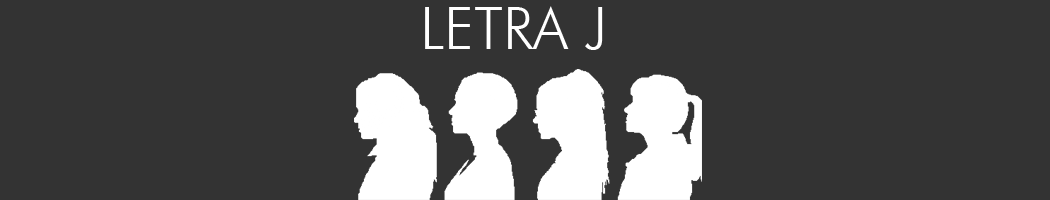
<style>
.page{position:relative;width:1050px;height:200px;background:#333333}
.page>*{position:absolute;margin:0}
.t1{font:58.3px "FuturaBT-Light";color:#ffffff}
</style>
<div class="page">
<p class="t1" style="left:425px;top:6px;width:178px;height:44px">LETRA J</p>
</div>
